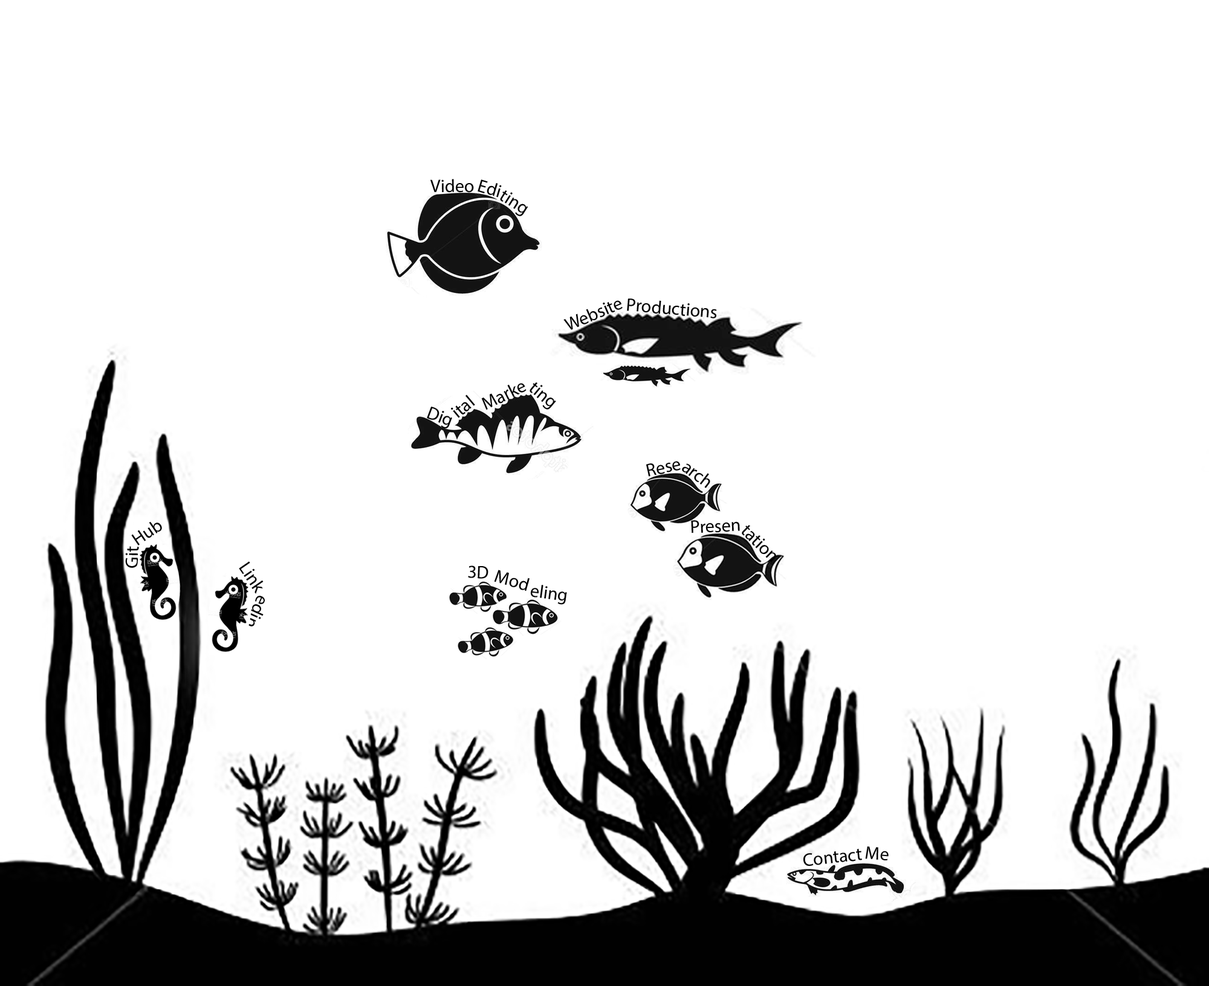
<style>
.page{position:relative;width:1209px;height:986px;background:#ffffff}
.page>*{position:absolute;margin:0}
.t1{font:18.2px "MyriadPro-Regular";color:#000000}
</style>
<div class="page">
<p class="t1" style="left:430px;top:179px;width:44px;height:14px;rotate:-1deg">Video</p>
<p class="t1" style="left:477px;top:180px;width:25px;height:18px;rotate:17deg">Edi</p>
<p class="t1" style="left:500px;top:190px;width:28px;height:26px;rotate:32deg">ting</p>
<p class="t1" style="left:563px;top:300px;width:60px;height:30px;rotate:-23deg">Website</p>
<p class="t1" style="left:627px;top:299px;width:90px;height:20px;rotate:5deg">Productions</p>
<p class="t1" style="left:481px;top:383px;width:45px;height:27px;rotate:-26deg">Marke</p>
<p class="t1" style="left:529px;top:383px;width:27px;height:27px;rotate:40deg">ting</p>
<p class="t1" style="left:451px;top:395px;width:24px;height:23px;rotate:-40deg">ital</p>
<p class="t1" style="left:427px;top:407px;width:25px;height:22px;rotate:21deg">Dig</p>
<p class="t1" style="left:646px;top:461px;width:35px;height:16px;rotate:-12deg">Rese</p>
<p class="t1" style="left:682px;top:464px;width:28px;height:24px;rotate:37deg">arch</p>
<p class="t1" style="left:131px;top:522px;width:31px;height:24px;rotate:-34deg">Hub</p>
<p class="t1" style="left:691px;top:520px;width:49px;height:13px;rotate:-2deg">Presen</p>
<p class="t1" style="left:742px;top:525px;width:34px;height:38px;rotate:45deg">tation</p>
<p class="t1" style="left:125px;top:546px;width:14px;height:22px;rotate:-89deg">Git</p>
<p class="t1" style="left:239px;top:562px;width:25px;height:32px;rotate:55deg">Link</p>
<p class="t1" style="left:468px;top:566px;width:20px;height:13px;rotate:2deg">3D</p>
<p class="t1" style="left:494px;top:570px;width:35px;height:21px;rotate:16deg">Mod</p>
<p class="t1" style="left:531px;top:585px;width:36px;height:20px;rotate:8deg">eling</p>
<p class="t1" style="left:245px;top:596px;width:20px;height:31px;rotate:114deg">edin</p>
<p class="t1" style="left:803px;top:849px;width:59px;height:18px;rotate:-6deg">Contact</p>
<p class="t1" style="left:865px;top:847px;width:24px;height:14px;rotate:5deg">Me</p>
</div>
